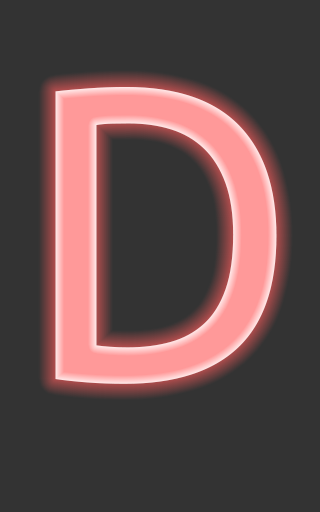
<style>
.page{position:relative;width:320px;height:512px;background:#333333}
.page>*{position:absolute;margin:0}
.t1{font:400px "Aller-Regular";color:#ff9999}
</style>
<div class="page">
<p class="t1" style="left:55px;top:87px;width:222px;height:297px">D</p>
</div>
